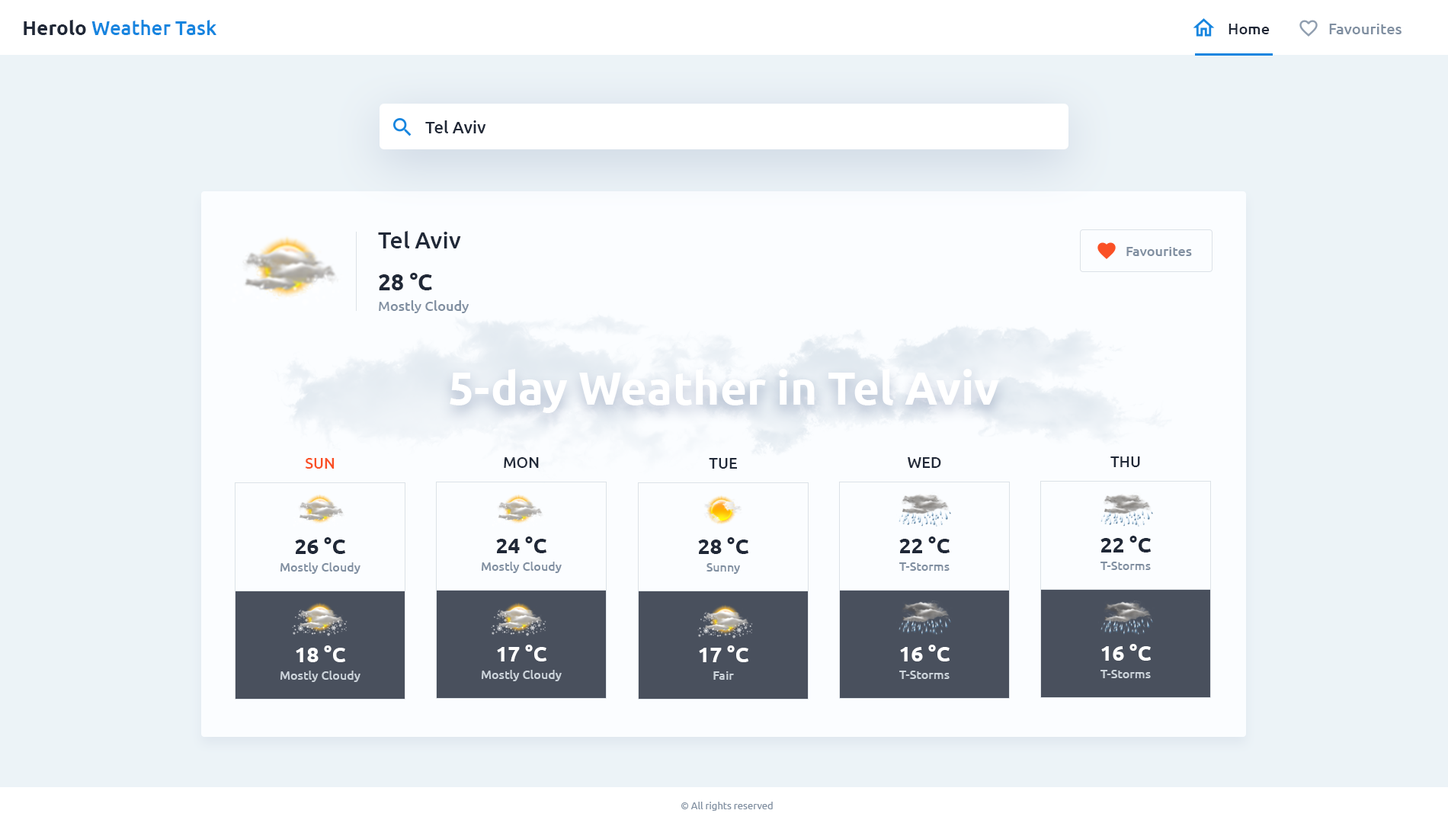
<style>
.page{position:relative;width:1448px;height:823px;background:#ecf3f7}
.page>*{position:absolute;margin:0}
.t1{font:19.8px "Ubuntu-Medium";color:#1685df}
.t2{font:19.8px "Ubuntu-Bold";color:#202837}
.t3{font:15.2px "Ubuntu-Medium";color:#202837}
.t4{font:15.2px "Ubuntu-Medium";color:#808fa1}
.t5{font:16.8px "Ubuntu-Medium";color:#202837}
.t6{font:22.9px "Ubuntu-Medium";color:#202837}
.t7{font:13.7px "Ubuntu-Medium";color:#808fa1}
.t8{font:22.9px "Ubuntu-Bold";color:#202837}
.t9{font:45.7px "Ubuntu-Bold";color:#ffffff}
.t10{font:15.2px "Ubuntu-Medium";color:#fa5025}
.t11{font:21.3px "Ubuntu-Bold";color:#202837}
.t12{font:12.2px "Ubuntu-Medium";color:#808fa1}
.t13{font:21.3px "Ubuntu-Bold";color:#ffffff}
.t14{font:12.2px "Ubuntu-Medium";color:#ccd4db}
.t15{font:9.9px "Ubuntu";color:#808fa1}
</style>
<div class="page">
<p class="t1" style="left:24px;top:20px;width:192px;height:15px"><span class="t2">Herolo </span>Weather Task</p>
<p class="t3" style="left:1229px;top:24px;width:41px;height:10px">Home</p>
<p class="t4" style="left:1329px;top:24px;width:73px;height:10px">Favourites</p>
<p class="t5" style="left:425px;top:120px;width:61px;height:13px">Tel Aviv</p>
<p class="t6" style="left:378px;top:231px;width:83px;height:18px">Tel Aviv</p>
<p class="t7" style="left:1127px;top:247px;width:65px;height:9px">Favourites</p>
<p class="t8" style="left:379px;top:273px;width:53px;height:17px">28 °C</p>
<p class="t7" style="left:379px;top:300px;width:90px;height:13px">Mostly Cloudy</p>
<p class="t9" style="left:450px;top:369px;width:549px;height:44px">5-day Weather in Tel Aviv</p>
<p class="t10" style="left:305px;top:458px;width:30px;height:11px">SUN</p>
<p class="t3" style="left:504px;top:457px;width:35px;height:11px">MON</p>
<p class="t3" style="left:709px;top:458px;width:28px;height:11px">TUE</p>
<p class="t3" style="left:908px;top:457px;width:33px;height:11px">WED</p>
<p class="t3" style="left:1111px;top:457px;width:29px;height:10px">THU</p>
<p class="t11" style="left:295px;top:537px;width:50px;height:17px">26 °C</p>
<p class="t11" style="left:496px;top:537px;width:51px;height:16px">24 °C</p>
<p class="t11" style="left:698px;top:537px;width:51px;height:17px">28 °C</p>
<p class="t11" style="left:900px;top:537px;width:50px;height:16px">22 °C</p>
<p class="t11" style="left:1101px;top:536px;width:50px;height:17px">22 °C</p>
<p class="t12" style="left:281px;top:563px;width:80px;height:11px">Mostly Cloudy</p>
<p class="t12" style="left:482px;top:562px;width:80px;height:11px">Mostly Cloudy</p>
<p class="t12" style="left:707px;top:563px;width:33px;height:11px">Sunny</p>
<p class="t12" style="left:900px;top:563px;width:50px;height:8px">T-Storms</p>
<p class="t12" style="left:1101px;top:562px;width:50px;height:8px">T-Storms</p>
<p class="t13" style="left:296px;top:646px;width:49px;height:16px">18 °C</p>
<p class="t13" style="left:497px;top:645px;width:50px;height:17px">17 °C</p>
<p class="t13" style="left:699px;top:646px;width:50px;height:16px">17 °C</p>
<p class="t13" style="left:900px;top:645px;width:50px;height:17px">16 °C</p>
<p class="t13" style="left:1102px;top:644px;width:49px;height:17px">16 °C</p>
<p class="t14" style="left:281px;top:671px;width:80px;height:11px">Mostly Cloudy</p>
<p class="t14" style="left:482px;top:670px;width:80px;height:11px">Mostly Cloudy</p>
<p class="t14" style="left:714px;top:672px;width:20px;height:8px">Fair</p>
<p class="t14" style="left:900px;top:671px;width:50px;height:8px">T-Storms</p>
<p class="t14" style="left:1101px;top:670px;width:50px;height:8px">T-Storms</p>
<p class="t15" style="left:681px;top:802px;width:92px;height:9px">© All rights reserved</p>
</div>
